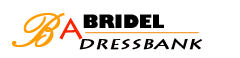
<style>
.page{position:relative;width:240px;height:58px;background:#ffffff}
.page>*{position:absolute;margin:0}
.t1{font:60px "PalaceScriptMT";color:#ff9c00;font-weight:bold}
.t2{font:33.2px "LithosPro-Regular";color:#ff2400}
.t3{font:18px "GillSans-UltraBold";color:#000000}
.t4{font:14px "LithosPro-Regular";color:#040001;font-weight:bold;font-style:italic;scale:1.38 1}
</style>
<div class="page">
<p class="t1" style="left:12px;top:13px;width:53px;height:34px">B</p>
<p class="t2" style="left:59px;top:17px;width:24px;height:23px">a</p>
<p class="t3" style="left:83px;top:14px;width:81px;height:14px">BRIDEL</p>
<p class="t4" style="left:79px;top:38px;width:123px;height:12px">DRESSBANK</p>
</div>
